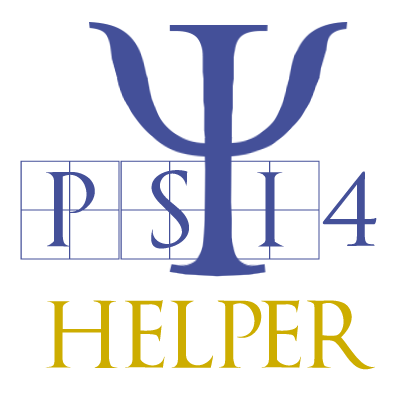
<style>
.page{position:relative;width:400px;height:400px;background:#ffffff}
.page>*{position:absolute;margin:0}
.t1{font:100px "TrajanusBricks";color:#445099}
.t2{font:90px "TrajanusBricks";color:#cdad00}
</style>
<div class="page">
<p class="t1" style="left:20px;top:160px;width:357px;height:100px">PSI4</p>
<p class="t2" style="left:45px;top:300px;width:330px;height:70px">helper</p>
</div>
